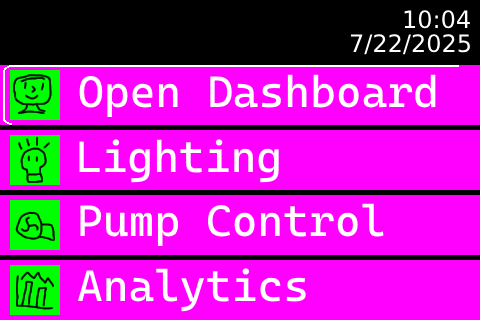
<style>
.page{position:relative;width:480px;height:320px;background:#ff00ff}
.page>*{position:absolute;margin:0}
.t1{font:24px "DejaVuSans";color:#ffffff}
.t2{font:44px "CascadiaCode";color:#ffffff}
</style>
<div class="page">
<p class="t1" style="left:404px;top:10px;width:66px;height:19px">10:04</p>
<p class="t1" style="left:350px;top:34px;width:120px;height:21px">7/22/2025</p>
<p class="t2" style="left:79px;top:74px;width:357px;height:43px">Open Dashboard</p>
<p class="t2" style="left:79px;top:139px;width:200px;height:44px">Lighting</p>
<p class="t2" style="left:80px;top:203px;width:304px;height:43px">Pump Control</p>
<p class="t2" style="left:77px;top:268px;width:229px;height:44px">Analytics</p>
</div>
